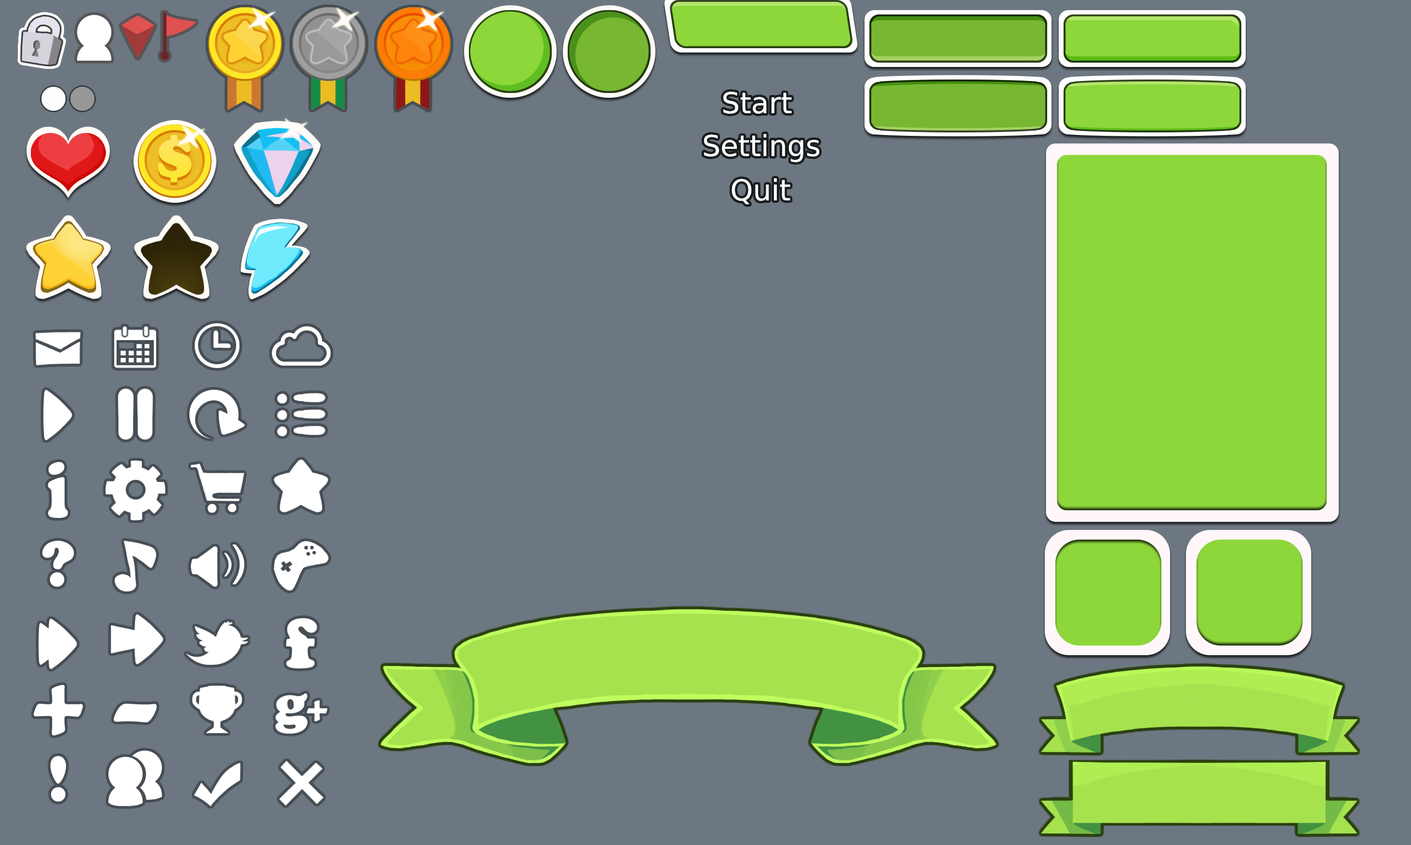
<style>
.page{position:relative;width:1411px;height:845px;background:#6c7781}
.page>*{position:absolute;margin:0}
.t1{font:28.9px "CooperBlack";color:#ffffff}
.t2{font:82.6px "CooperBlack";color:#ffffff;scale:0.71 1}
.t3{font:67.5px "CooperBlack";color:#ffffff}
.t4{font:73.4px "CooperBlack";letter-spacing:0.025em;color:#ffffff}
.t5{font:102.2px "CooperBlack";letter-spacing:0.025em;color:#ffffff}
.t6{font:102.2px "CooperBlack";letter-spacing:0.025em;color:#ffffff;scale:1.47 1}
</style>
<div class="page">
<p class="t1" style="left:723px;top:92px;width:69px;height:22px">Start</p>
<p class="t1" style="left:723px;top:92px;width:69px;height:22px">Start</p>
<p class="t1" style="left:704px;top:134px;width:116px;height:28px">Settings</p>
<p class="t1" style="left:704px;top:134px;width:116px;height:28px">Settings</p>
<p class="t1" style="left:731px;top:178px;width:59px;height:26px">Quit</p>
<p class="t1" style="left:731px;top:178px;width:59px;height:26px">Quit</p>
<p class="t2" style="left:48px;top:462px;width:20px;height:56px">i</p>
<p class="t3" style="left:42px;top:541px;width:32px;height:46px">?</p>
<p class="t4" style="left:286px;top:618px;width:31px;height:51px">f</p>
<p class="t5" style="left:33px;top:685px;width:50px;height:51px">+</p>
<p class="t6" style="left:114px;top:704px;width:43px;height:19px">-</p>
<p class="t3" style="left:50px;top:756px;width:16px;height:46px">!</p>
</div>
